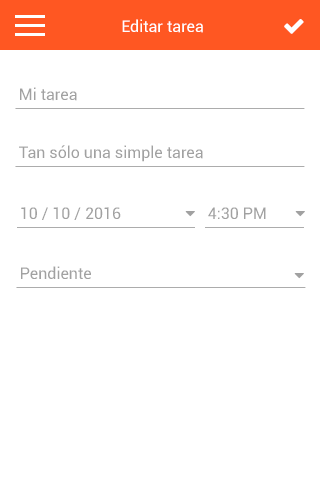
<style>
.page{position:relative;width:320px;height:480px;background:#ffffff}
.page>*{position:absolute;margin:0}
.t1{font:16px "Roboto-Regular";color:#ffffff}
.t2{font:16px "Roboto-Regular";color:#a1a1a1}
</style>
<div class="page">
<p class="t1" style="left:122px;top:19px;width:81px;height:14px">Editar tarea</p>
<p class="t2" style="left:20px;top:87px;width:57px;height:14px">Mi tarea</p>
<p class="t2" style="left:19px;top:145px;width:184px;height:17px">Tan sólo una simple tarea</p>
<p class="t2" style="left:21px;top:207px;width:100px;height:13px">10 / 10 / 2016</p>
<p class="t2" style="left:208px;top:207px;width:58px;height:12px">4:30 PM</p>
<p class="t2" style="left:21px;top:266px;width:70px;height:13px">Pendiente</p>
</div>
